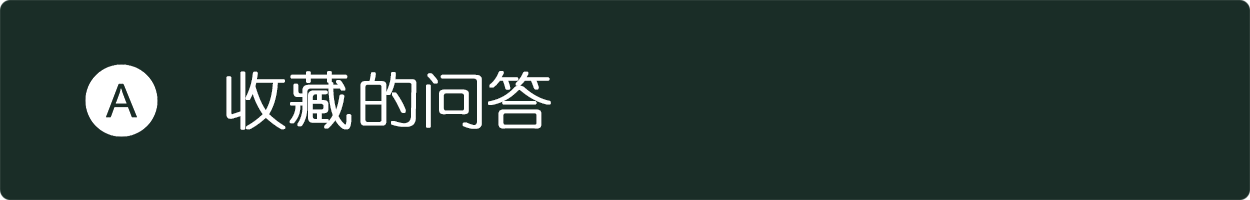
<style>
.page{position:relative;width:1250px;height:200px;background:#1a2d27}
.page>*{position:absolute;margin:0}
.t1{font:60.8px "YouYuan";letter-spacing:0.01em;color:#ffffff;font-weight:bold;scale:1.05 1}
</style>
<div class="page">
<p class="t1" style="left:226px;top:71px;width:325px;height:59px">收藏的问答</p>
</div>
